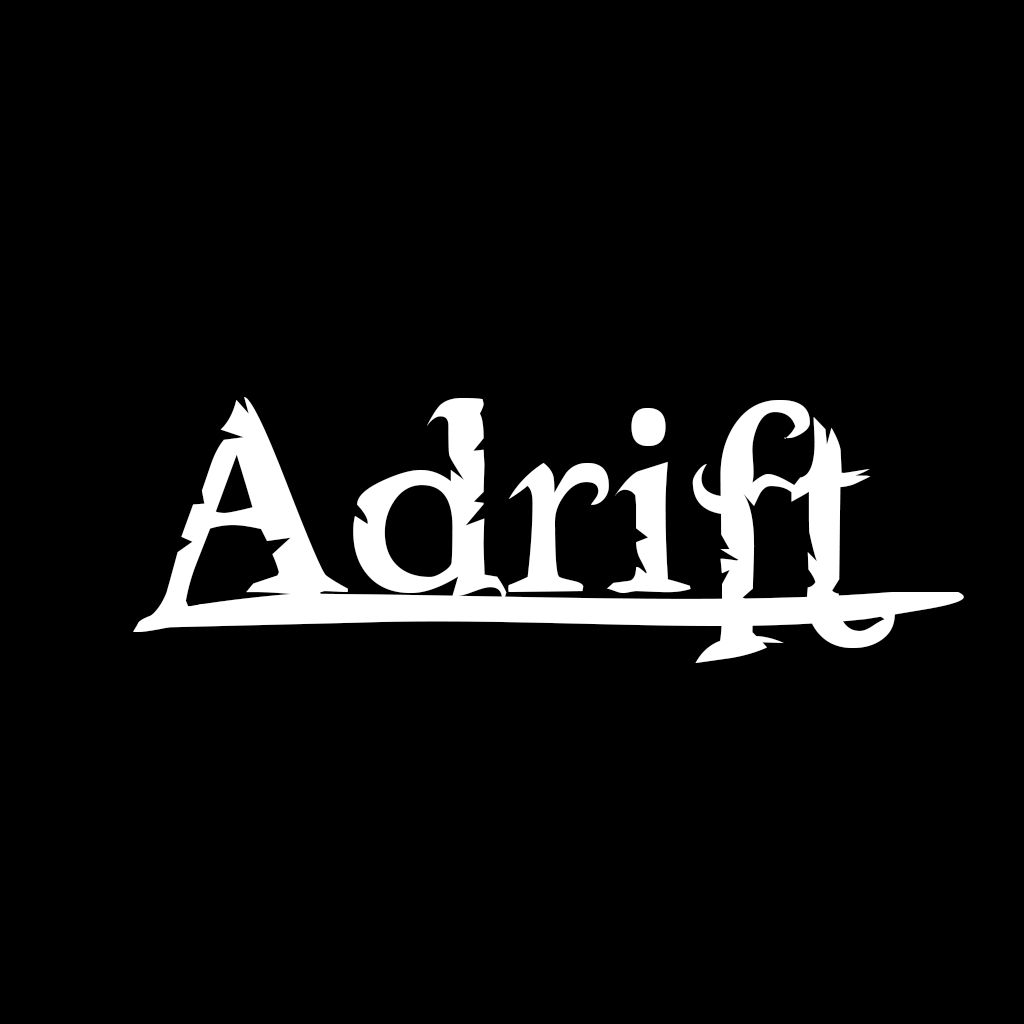
<style>
.page{position:relative;width:1024px;height:1024px;background:#000000}
.page>*{position:absolute;margin:0}
.t1{font:400.1px "Freebooter";color:#ffffff}
.t2{font:250.6px "CaptainsTable";color:#ffffff;scale:7.65 1}
</style>
<div class="page">
<p class="t1" style="left:133px;top:397px;width:762px;height:266px">Adrift</p>
<p class="t2" style="left:137px;top:592px;width:827px;height:36px">-</p>
</div>
